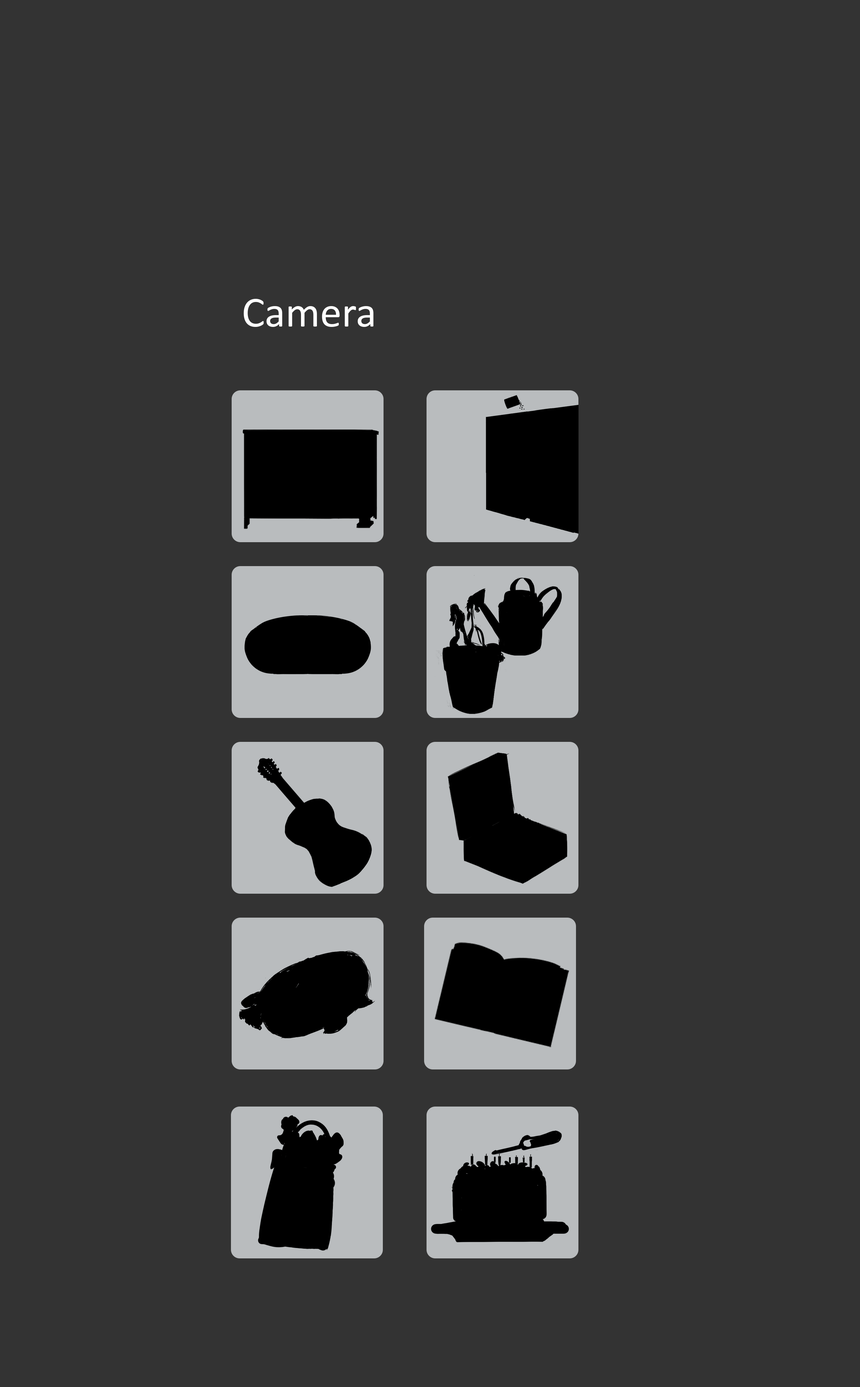
<style>
.page{position:relative;width:860px;height:1387px;background:#333333}
.page>*{position:absolute;margin:0}
.t1{font:43.3px "Calibri";color:#ffffff}
</style>
<div class="page">
<p class="t1" style="left:243px;top:299px;width:130px;height:28px">Camera</p>
</div>
